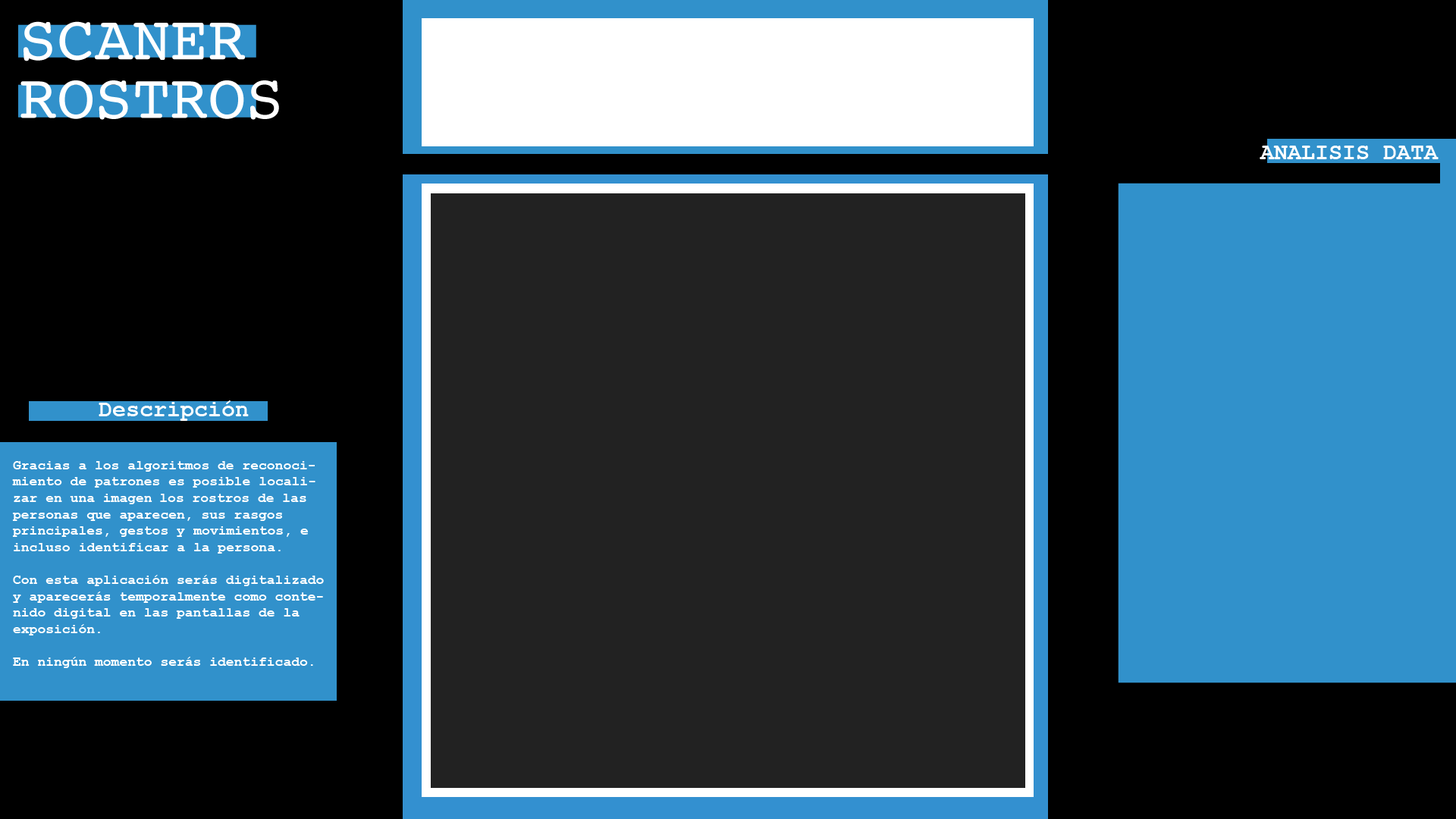
<style>
.page{position:relative;width:1456px;height:819px;background:#000000}
.page>*{position:absolute;margin:0}
.t1{font:22.7px "CourierNewPS-BoldMT";color:#ffffff}
.t2{font:13.6px "CourierNewPS-BoldMT";color:#ffffff}
</style>
<div class="page">
<p class="t1" style="left:1260px;top:146px;width:179px;height:13px">ANALISIS DATA</p>
<p class="t1" style="left:99px;top:400px;width:150px;height:21px">Descripción</p>
<p class="t2" style="left:12px;top:461px;width:312px;height:207px">Gracias a los algoritmos de reconocimiento de patrones es posible localizar en una imagen los rostros de las personas que aparecen, sus rasgos principales, gestos y movimientos, e incluso identificar a la persona.<br><br>Con esta aplicación serás digitalizado y aparecerás temporalmente como contenido digital en las pantallas de la exposición.<br><br>En ningún momento serás identificado.</p>
</div>
